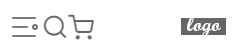
<style>
.page{position:relative;width:238px;height:53px;background:#ffffff}
.page>*{position:absolute;margin:0}
.t1{font:20px "ScriptMTBold";color:#ffffff}
</style>
<div class="page">
<p class="t1" style="left:187px;top:17px;width:34px;height:19px">logo</p>
</div>
